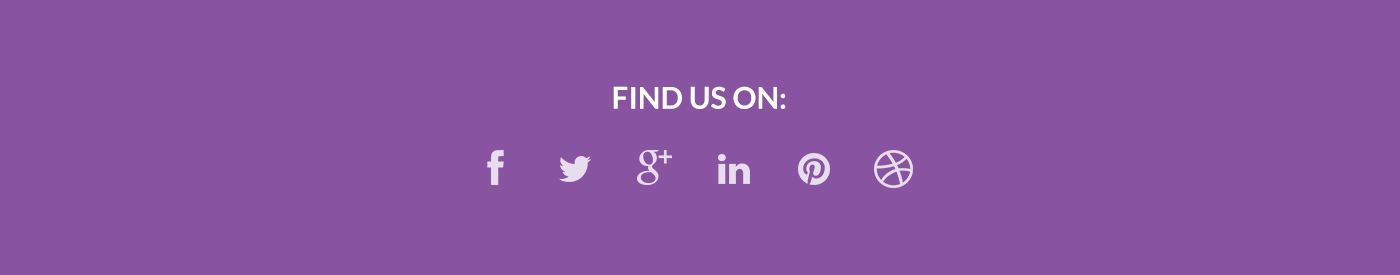
<style>
.page{position:relative;width:1400px;height:275px;background:#8853a1}
.page>*{position:absolute;margin:0}
.t1{font:30px "Lato-Bold";color:#ffffff}
</style>
<div class="page">
<p class="t1" style="left:613px;top:86px;width:173px;height:23px">FIND US ON:</p>
</div>
